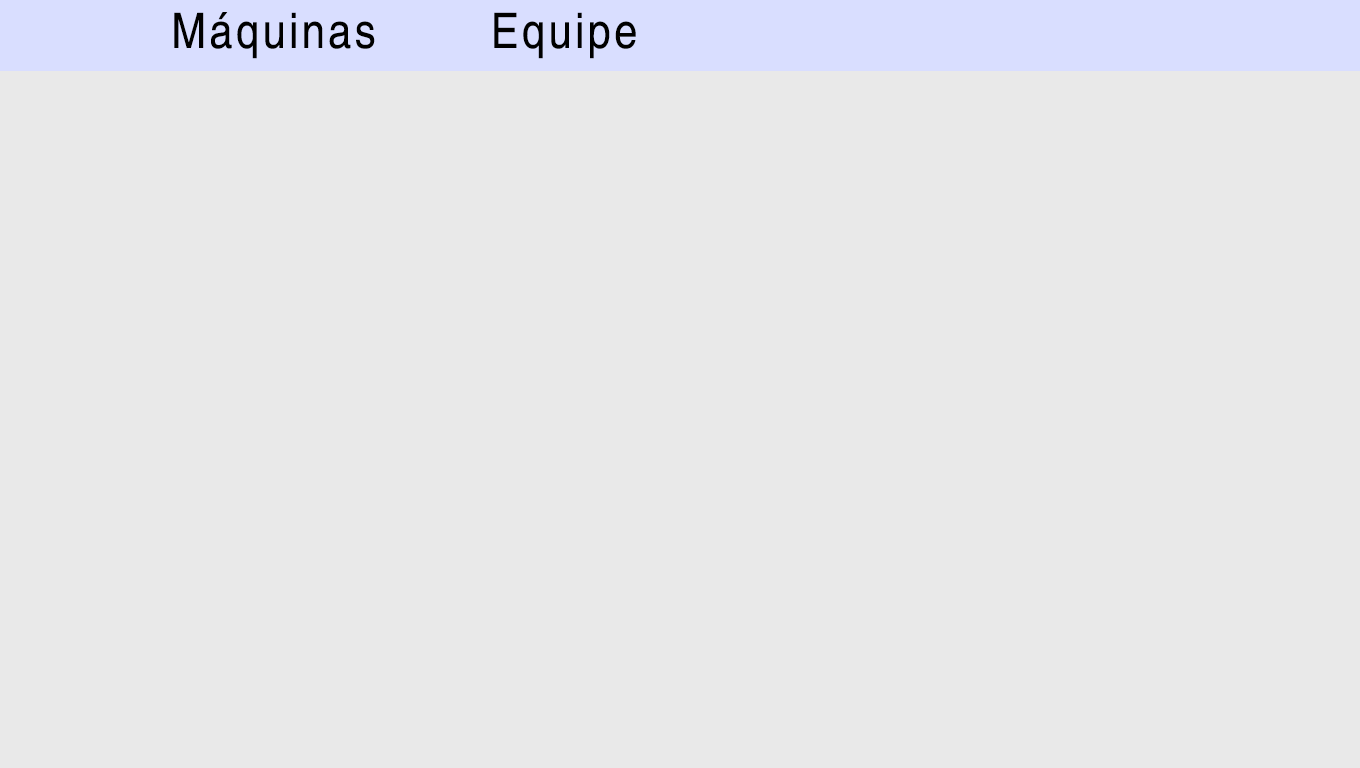
<style>
.page{position:relative;width:1360px;height:768px;background:#e9e9e9}
.page>*{position:absolute;margin:0}
.t1{font:48.8px "Helvetica";letter-spacing:0.08em;color:#000000;scale:0.85 1}
</style>
<div class="page">
<p class="t1" style="left:174px;top:12px;width:201px;height:47px">Máquinas</p>
<p class="t1" style="left:494px;top:12px;width:142px;height:47px">Equipe</p>
</div>
